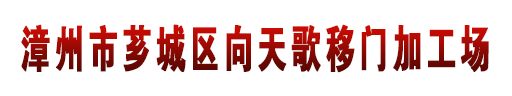
<style>
.page{position:relative;width:512px;height:96px;background:#ffffff}
.page>*{position:absolute;margin:0}
.t1{font:50.7px "FZDHTJW--GB1-0";letter-spacing:0.1em;font-weight:bold;scale:0.59 1}
</style>
<div class="page">
<p class="t1" style="left:21px;top:24px;width:468px;height:49px">漳州市芗城区向天歌移门加工场</p>
</div>
